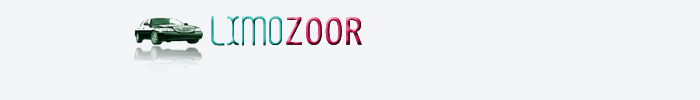
<style>
.page{position:relative;width:700px;height:100px;background:#f4f5f8}
.page>*{position:absolute;margin:0}
.t1{font:36px "LoisAnn";letter-spacing:0.05em}
.t2{font:36px "MS-Gothic";letter-spacing:0.05em}
</style>
<div class="page">
<p class="t1" style="left:211px;top:16px;width:151px;height:30px">LIMO<span class="t2">ZOOR</span></p>
<p class="t1" style="left:211px;top:16px;width:151px;height:30px">LIMO<span class="t2">ZOOR</span></p>
</div>
